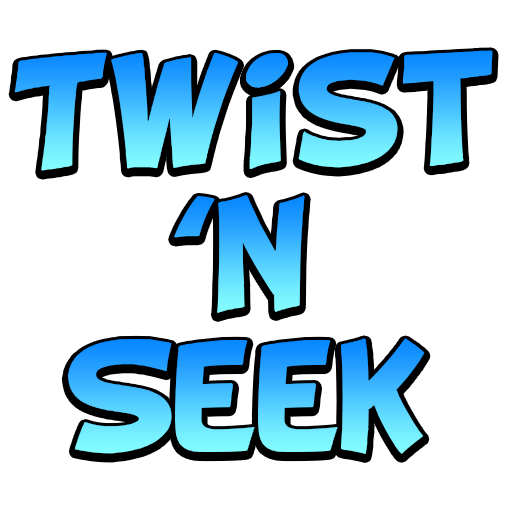
<style>
.page{position:relative;width:512px;height:512px;background:#ffffff}
.page>*{position:absolute;margin:0}
.t1{font:125px "BDCartoonShout"}
</style>
<div class="page">
<p class="t1" style="left:14px;top:50px;width:479px;height:121px">Twist</p>
<p class="t1" style="left:174px;top:195px;width:131px;height:118px">‘N</p>
<p class="t1" style="left:68px;top:338px;width:357px;height:116px">Seek</p>
</div>
